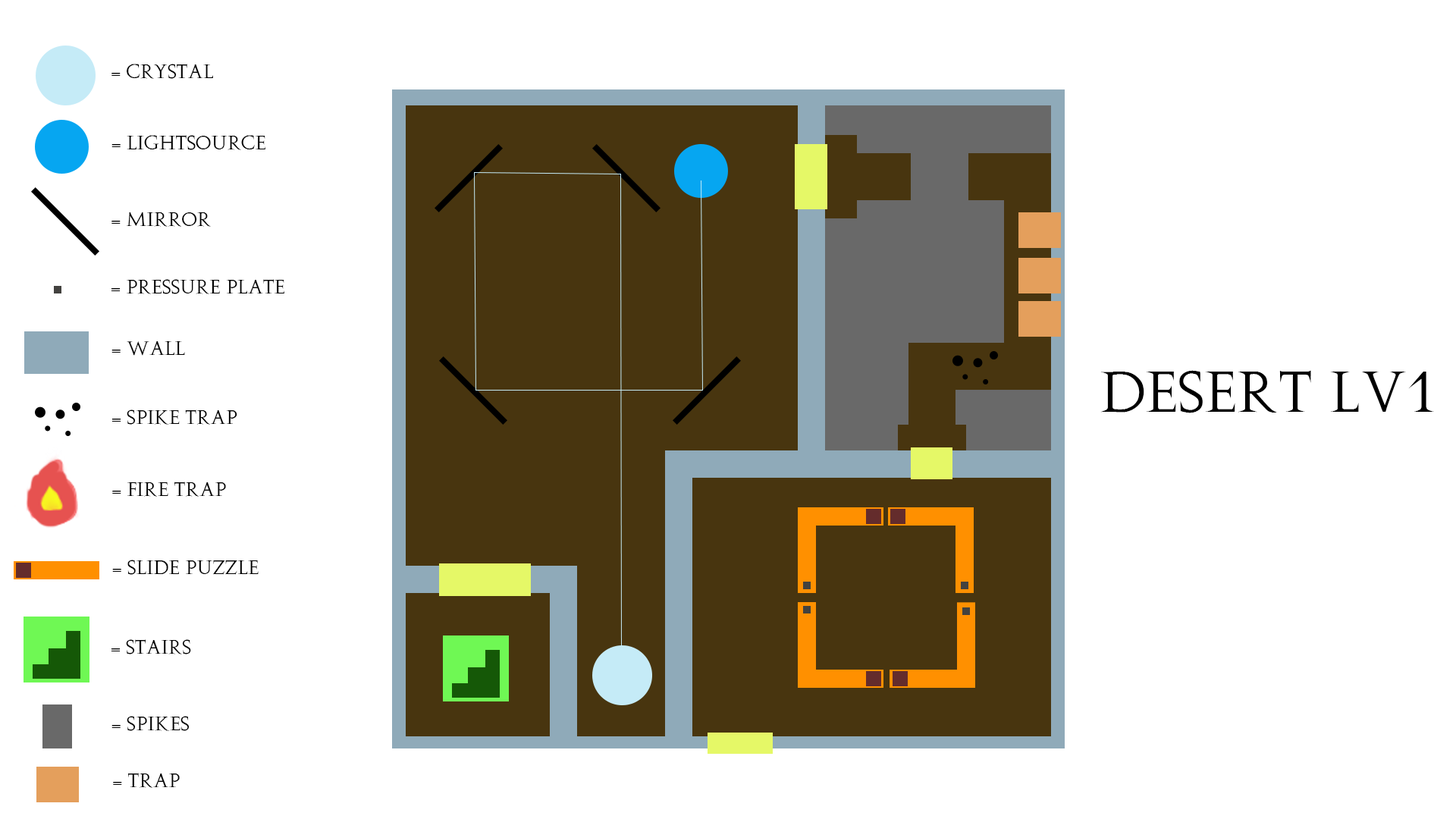
<style>
.page{position:relative;width:1456px;height:819px;background:#ffffff}
.page>*{position:absolute;margin:0}
.t1{font:18.2px "Augustus";color:#000000}
.t2{font:54.6px "Augustus";color:#000000}
</style>
<div class="page">
<p class="t1" style="left:111px;top:64px;width:102px;height:15px">= Crystal</p>
<p class="t1" style="left:111px;top:135px;width:154px;height:15px">= lightSource</p>
<p class="t1" style="left:111px;top:212px;width:100px;height:15px">= Mirror</p>
<p class="t1" style="left:111px;top:279px;width:173px;height:15px">= Pressure plate</p>
<p class="t1" style="left:111px;top:340px;width:74px;height:16px">= Wall</p>
<p class="t2" style="left:1100px;top:370px;width:334px;height:43px">desert Lv1</p>
<p class="t1" style="left:111px;top:409px;width:126px;height:16px">= spike Trap</p>
<p class="t1" style="left:112px;top:482px;width:114px;height:15px">= fire trap</p>
<p class="t1" style="left:112px;top:560px;width:147px;height:15px">= Slide Puzzle</p>
<p class="t1" style="left:111px;top:639px;width:80px;height:15px">= Stairs</p>
<p class="t1" style="left:111px;top:716px;width:79px;height:15px">= Spikes</p>
<p class="t1" style="left:113px;top:773px;width:67px;height:15px">= Trap</p>
</div>
